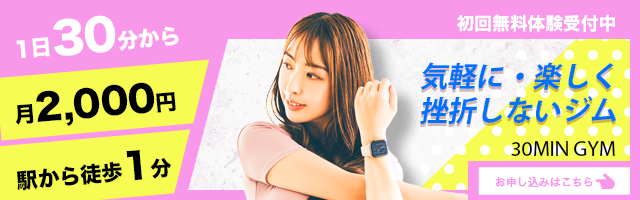
<style>
.page{position:relative;width:640px;height:200px;background:#f997ea}
.page>*{position:absolute;margin:0}
.t1{font:21.3px "HiraKakuStd-W8";color:#ffffff}
.t2{font:42.7px "HiraKakuStd-W8";color:#ffffff}
.t3{font:17.8px "HiraKakuStd-W8";color:#ffffff}
.t4{font:28.4px "KozGoPr6N-Bold";color:#0072ff;font-style:italic}
.t5{font:35.6px "HiraKakuStd-W8";color:#000000}
.t6{font:21.3px "HiraKakuStd-W8";color:#000000}
.t7{font:21.3px "MyriadPro-Regular";color:#000000}
.t8{font:10.7px "HiraKakuPro-W3";color:#f997ea;font-weight:bold}
</style>
<div class="page">
<p class="t1" style="left:16px;top:15px;width:163px;height:43px;rotate:-5deg">1日<span class="t2">30</span>分から</p>
<p class="t3" style="left:456px;top:14px;width:159px;height:18px">初回無料体験受付中</p>
<p class="t4" style="left:420px;top:62px;width:196px;height:62px">気軽に・楽しく<br>挫折しないジム</p>
<p class="t5" style="left:15px;top:82px;width:161px;height:44px;rotate:-5deg"><span class="t6">月</span>2,000<span class="t6">円</span></p>
<p class="t6" style="left:16px;top:150px;width:156px;height:41px;rotate:-5deg">駅から徒歩<span class="t5">1</span>分</p>
<p class="t7" style="left:511px;top:141px;width:104px;height:15px">30MIN GYM</p>
<p class="t8" style="left:495px;top:176px;width:98px;height:12px">お申し込みはこちら</p>
</div>
